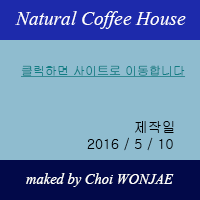
<style>
.page{position:relative;width:200px;height:200px;background:#8fbccf}
.page>*{position:absolute;margin:0}
.t1{font:24px "Vijaya";color:#ffffff}
.t2{font:12px "Gulim";color:#117d84;text-decoration:underline}
.t3{font:14px "Gulim";color:#000001}
.t4{font:14px "Gulim";color:#ffffff}
.t5{font:18px "Vijaya";color:#ffffff}
</style>
<div class="page">
<p class="t1" style="left:15px;top:11px;width:171px;height:18px">Natural Coffee House</p>
<p class="t2" style="left:21px;top:65px;width:165px;height:12px">클릭하면 사이트로 이동합니다</p>
<p class="t3" style="left:87px;top:121px;width:87px;height:30px"><span class="t4">          </span>제작일 <br>2016 / 5 / 10</p>
<p class="t5" style="left:26px;top:173px;width:148px;height:14px">maked by Choi WONJAE</p>
</div>
